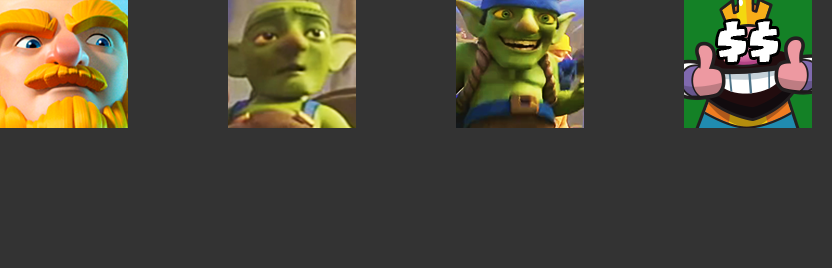
<style>
.page{position:relative;width:832px;height:268px;background:#333333}
.page>*{position:absolute;margin:0}
.t1{font:39.4px "Supercell-Magic";color:#ffffff}
</style>
<div class="page">
<p class="t1" style="left:718px;top:21px;width:60px;height:41px">$$</p>
</div>
